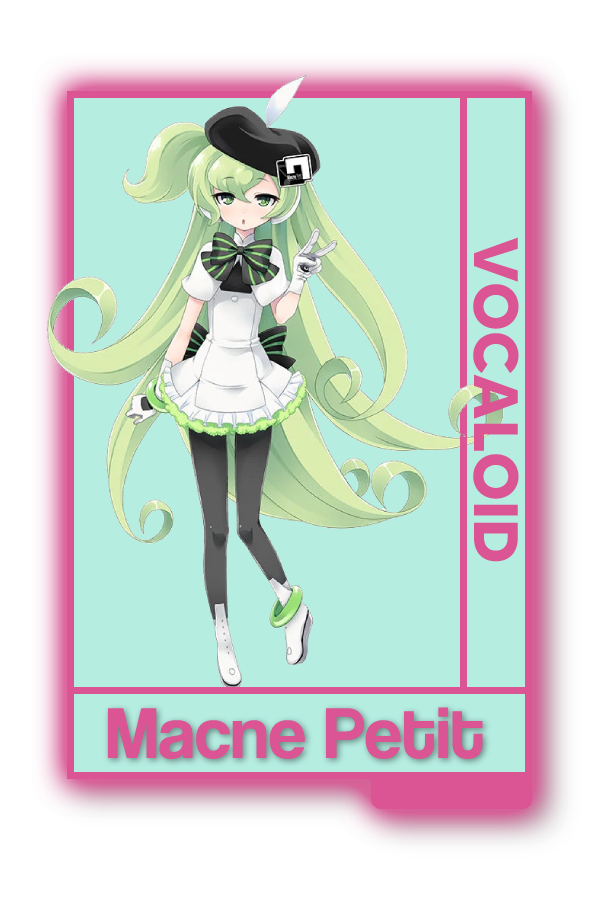
<style>
.page{position:relative;width:600px;height:900px;background:#b5ede1}
.page>*{position:absolute;margin:0}
.t1{font:62.5px "MADETOMMY-Bold";color:#db5493}
.t2{font:75px "CoolveticaRg-Regular";color:#db5493}
</style>
<div class="page">
<p class="t1" style="left:473px;top:237px;width:46px;height:325px;rotate:90deg">VOCALOID</p>
<p class="t2" style="left:107px;top:707px;width:376px;height:52px">Macne Petit</p>
</div>
